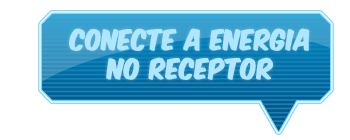
<style>
.page{position:relative;width:350px;height:140px;background:#ffffff}
.page>*{position:absolute;margin:0}
.t1{font:24.3px "KomikaAxis";color:#b0e6ff;font-weight:bold;scale:0.93 1}
</style>
<div class="page">
<p class="t1" style="left:69px;top:28px;width:241px;height:52px;text-align:center">CONECTE A ENERGIA<br>NO RECEPTOR</p>
</div>
